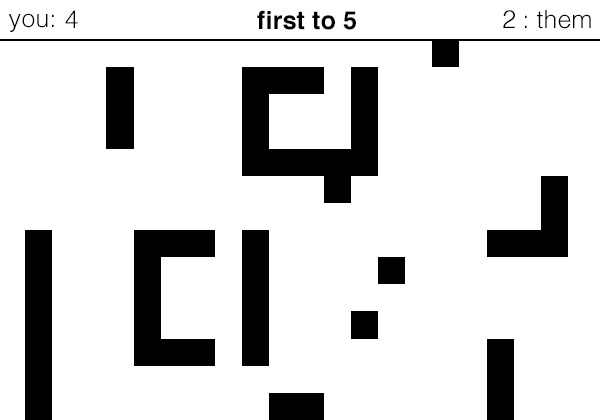
<style>
.page{position:relative;width:600px;height:420px;background:#ffffff}
.page>*{position:absolute;margin:0}
.t1{font:25px "Helvetica-Light";letter-spacing:0.005em;color:#000000}
.t2{font:25px "Helvetica-Bold";letter-spacing:0.005em;color:#000000}
</style>
<div class="page">
<p class="t1" style="left:9px;top:13px;width:45px;height:19px">you:</p>
<p class="t1" style="left:65px;top:10px;width:13px;height:18px">4</p>
<p class="t2" style="left:257px;top:10px;width:99px;height:20px">first to 5</p>
<p class="t1" style="left:503px;top:10px;width:12px;height:18px">2</p>
<p class="t1" style="left:525px;top:10px;width:66px;height:19px">: them</p>
</div>
